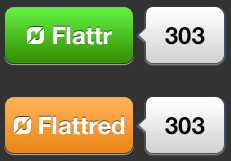
<style>
.page{position:relative;width:231px;height:161px;background:#333333}
.page>*{position:absolute;margin:0}
.t1{font:24px "HelveticaNeue-Bold";color:#ffffff}
.t2{font:24px "HelveticaNeue-Bold";color:#060606}
</style>
<div class="page">
<p class="t1" style="left:53px;top:26px;width:59px;height:19px">Flattr</p>
<p class="t2" style="left:165px;top:27px;width:40px;height:18px">303</p>
<p class="t1" style="left:39px;top:116px;width:86px;height:19px">Flattred</p>
<p class="t2" style="left:165px;top:117px;width:40px;height:18px">303</p>
</div>
